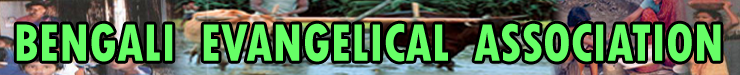
<style>
.page{position:relative;width:740px;height:75px}
.page>*{position:absolute;margin:0}
.t1{font:55.4px "TwCenMT-CondensedExtraBold";color:#66ff66;scale:0.89 1}
</style>
<div class="page">
<p class="t1" style="left:16px;top:23px;width:705px;height:39px">BENGALI  EVANGELICAL  ASSOCIATION</p>
</div>
